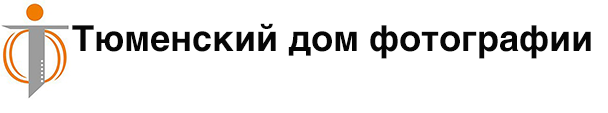
<style>
.page{position:relative;width:608px;height:113px;background:#ffffff}
.page>*{position:absolute;margin:0}
.t1{font:36px "Helvetica-Bold";color:#060606}
</style>
<div class="page">
<p class="t1" style="left:72px;top:23px;width:519px;height:36px">Тюменский дом фотографии</p>
</div>
